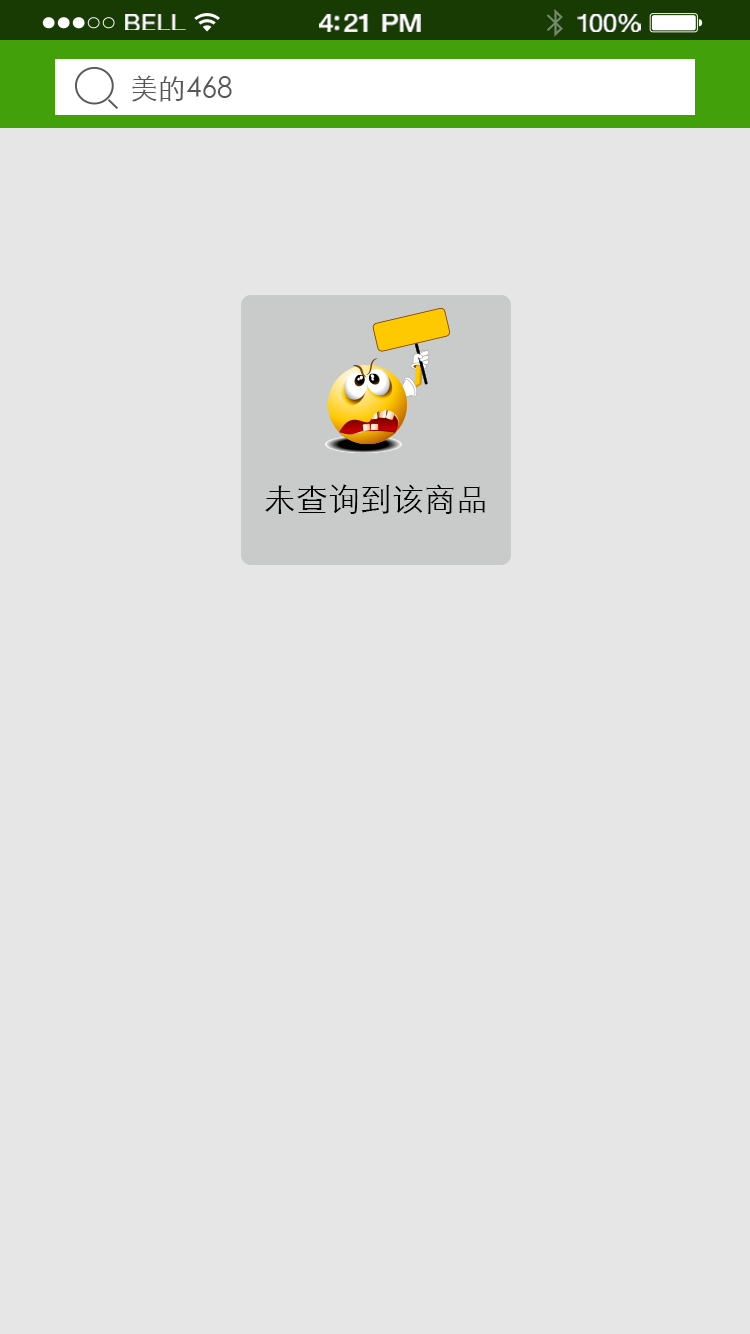
<style>
.page{position:relative;width:750px;height:1334px;background:#e6e6e6}
.page>*{position:absolute;margin:0}
.t1{font:23.3px "HelveticaNeue";letter-spacing:0.02em;color:#ffffff;scale:1.06 1}
.t2{font:25.3px "HelveticaNeue-Medium";letter-spacing:-0.02em;color:#ffffff;scale:1.06 1}
.t3{font:24.3px "HelveticaNeue";letter-spacing:-0.02em;color:#ffffff;scale:1.06 1}
.t4{font:28px "STXihei";color:#595757}
.t5{font:32px "STXihei";color:#000000}
</style>
<div class="page">
<p class="t1" style="left:125px;top:14px;width:61px;height:16px">BELL</p>
<p class="t2" style="left:319px;top:14px;width:102px;height:18px">4:21 PM</p>
<p class="t3" style="left:577px;top:14px;width:64px;height:18px">100%</p>
<p class="t4" style="left:132px;top:75px;width:100px;height:27px">美的468</p>
<p class="t5" style="left:265px;top:484px;width:220px;height:30px">未查询到该商品</p>
</div>
